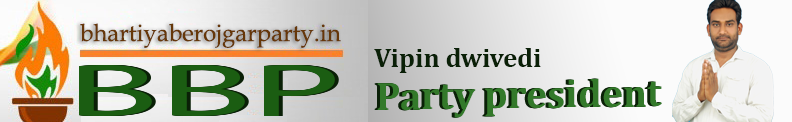
<style>
.page{position:relative;width:792px;height:122px}
.page>*{position:absolute;margin:0}
.t1{font:24px "BookAntiqua";color:#663709}
.t2{font:26.7px "Cambria-Bold";color:#0a2007}
.t3{font:75.4px "MyriadPro-Regular";color:#1b5d12;scale:2.26 1}
.t4{font:40px "Cambria-Bold";color:#33792a}
</style>
<div class="page">
<p class="t1" style="left:80px;top:23px;width:261px;height:25px">bhartiyaberojgarparty.in</p>
<p class="t2" style="left:374px;top:48px;width:167px;height:25px">Vipin dwivedi</p>
<p class="t3" style="left:79px;top:65px;width:256px;height:51px">BBP</p>
<p class="t4" style="left:377px;top:78px;width:285px;height:40px;rotate:-1deg">Party president</p>
</div>
